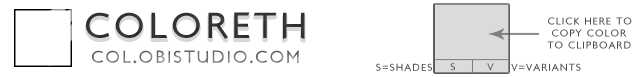
<style>
.page{position:relative;width:632px;height:77px;background:#ffffff}
.page>*{position:absolute;margin:0}
.t1{font:36.5px "LondonBetween";letter-spacing:0.1em;color:#404040;text-transform:uppercase}
.t2{font:10px "LondonBetween";letter-spacing:0.1em;color:#4c4c4c;text-transform:uppercase}
.t3{font:17.5px "LondonBetween";letter-spacing:0.1em;color:#707070;text-transform:uppercase}
.t4{font:10px "LondonBetween";letter-spacing:0.1em;color:#4e4e4e;text-transform:uppercase}
</style>
<div class="page">
<p class="t1" style="left:86px;top:12px;width:219px;height:27px;opacity:0.87">coloreth</p>
<p class="t2" style="left:547px;top:17px;width:85px;height:32px">CLICK HERE TO<br> COPY COLOR<br>To CLIPBOARD</p>
<p class="t3" style="left:92px;top:50px;width:207px;height:14px">COL.obistudio.com</p>
<p class="t4" style="left:376px;top:63px;width:205px;height:9px">S=SHADES                   V=VARIANTS</p>
<p class="t4" style="left:450px;top:63px;width:44px;height:8px">S V</p>
</div>
